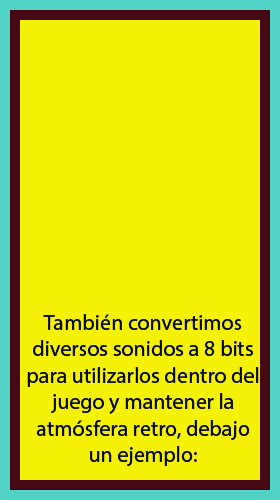
<style>
.page{position:relative;width:280px;height:500px;background:#f5f207}
.page>*{position:absolute;margin:0}
.t1{font:22px "MyriadPro-Regular";color:#060808}
</style>
<div class="page">
<p class="t1" style="left:27px;top:314px;width:232px;height:152px;text-align:center">También convertimos<br>diversos sonidos a 8 bits<br>para utilizarlos dentro del<br>juego y mantener la<br>atmósfera retro, debajo<br>un ejemplo:</p>
</div>
